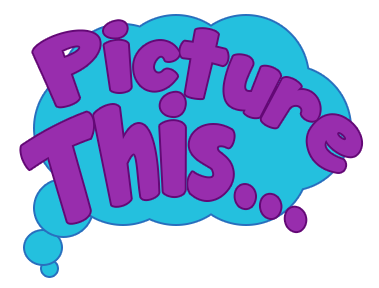
<style>
.page{position:relative;width:379px;height:288px;background:#ffffff}
.page>*{position:absolute;margin:0}
.t1{font:86.3px "JandaManateeSolid";color:#982dad;scale:0.89 1}
.t2{font:126px "JandaManateeSolid";color:#982dad;scale:0.67 1}
</style>
<div class="page">
<p class="t1" style="left:33px;top:21px;width:329px;height:151px;rotate:14deg">Picture</p>
<p class="t2" style="left:21px;top:92px;width:285px;height:140px">This...</p>
</div>
